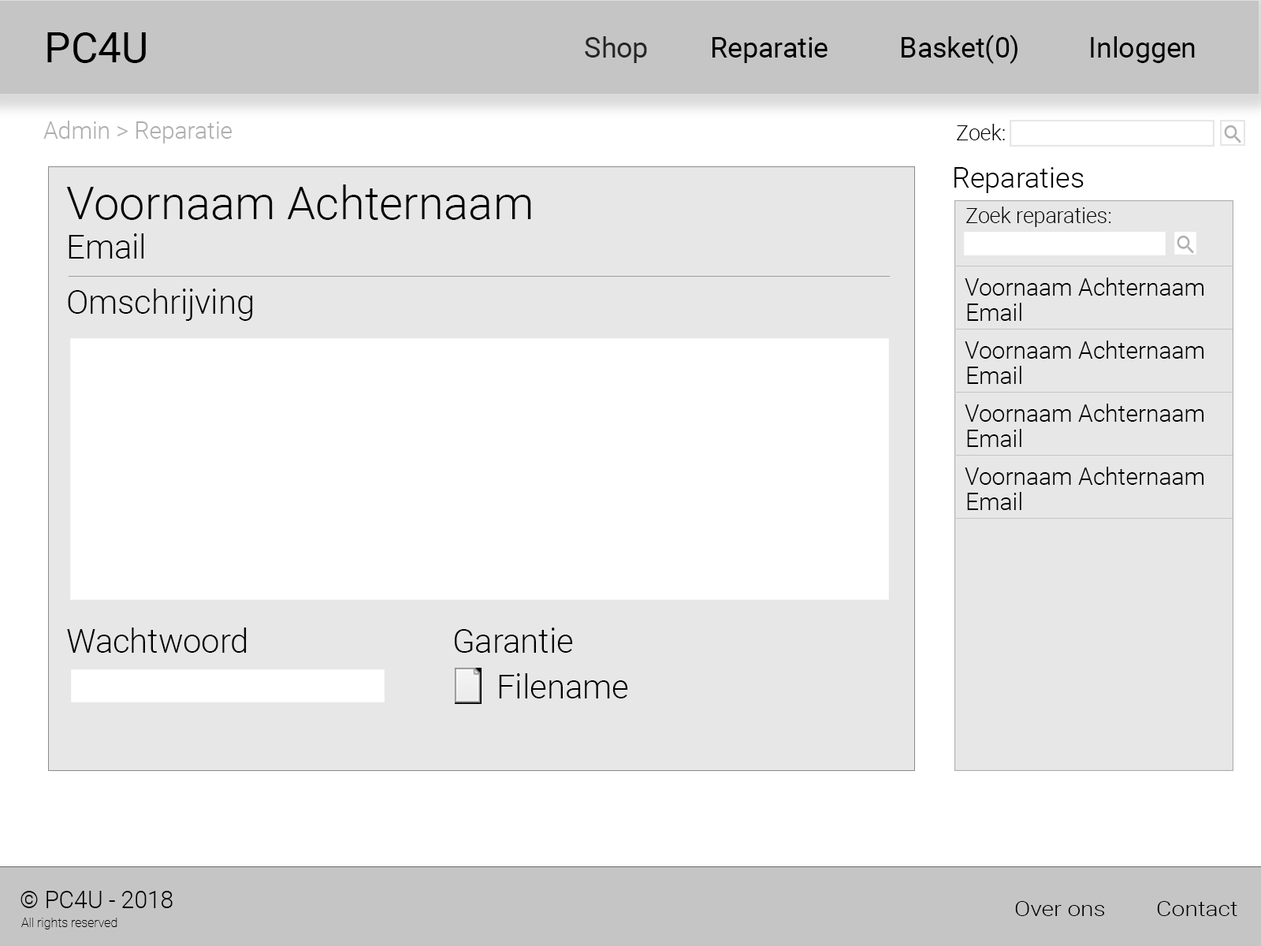
<style>
.page{position:relative;width:1261px;height:946px;background:#ffffff}
.page>*{position:absolute;margin:0}
.t1{font:42px "Roboto-Regular";color:#000000}
.t2{font:28px "Roboto-Regular";color:#000000}
.t3{font:28px "Roboto-Regular";color:#262626}
.t4{font:23.6px "Roboto-Light";color:#afafaf}
.t5{font:21px "Roboto-Light";color:#000000}
.t6{font:28.4px "Roboto-Light";color:#000000}
.t7{font:46px "Roboto-Light";color:#000000}
.t8{font:32.8px "Roboto-Light";color:#000000}
.t9{font:23.6px "Roboto-Light";color:#000000}
.t10{font:20.4px "Roboto-Light";color:#000000;scale:1.16 1}
.t11{font:12.6px "Roboto-Thin";color:#000000}
</style>
<div class="page">
<p class="t1" style="left:47px;top:32px;width:99px;height:31px">PC4U</p>
<p class="t2" style="left:585px;top:35px;width:610px;height:29px"><span class="t3">Shop</span>  Reparatie   Basket(0)   Inloggen</p>
<p class="t4" style="left:43px;top:121px;width:189px;height:22px">Admin &gt; Reparatie</p>
<p class="t5" style="left:957px;top:124px;width:48px;height:16px">Zoek:</p>
<p class="t6" style="left:954px;top:167px;width:130px;height:26px">Reparaties</p>
<p class="t7" style="left:66px;top:184px;width:465px;height:36px">Voornaam Achternaam</p>
<p class="t5" style="left:966px;top:206px;width:145px;height:21px">Zoek reparaties:</p>
<p class="t8" style="left:69px;top:233px;width:74px;height:25px">Email</p>
<p class="t9" style="left:965px;top:277px;width:239px;height:19px">Voornaam Achternaam</p>
<p class="t8" style="left:68px;top:288px;width:185px;height:33px">Omschrijving</p>
<p class="t9" style="left:967px;top:303px;width:54px;height:18px">Email</p>
<p class="t9" style="left:965px;top:340px;width:239px;height:19px">Voornaam Achternaam</p>
<p class="t9" style="left:967px;top:366px;width:54px;height:18px">Email</p>
<p class="t9" style="left:965px;top:403px;width:239px;height:19px">Voornaam Achternaam</p>
<p class="t9" style="left:967px;top:429px;width:54px;height:18px">Email</p>
<p class="t9" style="left:965px;top:467px;width:239px;height:18px">Voornaam Achternaam</p>
<p class="t9" style="left:967px;top:492px;width:54px;height:18px">Email</p>
<p class="t8" style="left:67px;top:627px;width:180px;height:26px">Wachtwoord</p>
<p class="t8" style="left:455px;top:627px;width:118px;height:26px">Garantie</p>
<p class="t8" style="left:499px;top:673px;width:129px;height:25px">Filename</p>
<p class="t9" style="left:20px;top:891px;width:153px;height:17px">© PC4U - 2018</p>
<p class="t10" style="left:1015px;top:901px;width:222px;height:15px">Over ons  Contact</p>
<p class="t11" style="left:21px;top:917px;width:96px;height:12px">All rights reserved</p>
</div>
